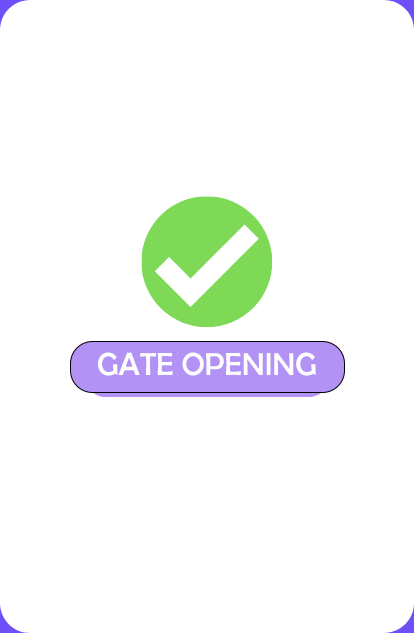
<style>
.page{position:relative;width:414px;height:633px;background:#ffffff}
.page>*{position:absolute;margin:0}
.t1{font:32px "BerlinSansFB-Reg";color:#fdfdfd}
</style>
<div class="page">
<p class="t1" style="left:98px;top:352px;width:218px;height:24px">GATE OPENING</p>
</div>
